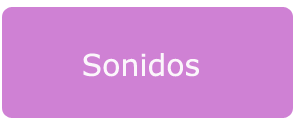
<style>
.page{position:relative;width:300px;height:125px;background:#cf81d4}
.page>*{position:absolute;margin:0}
.t1{font:30px "Verdana";color:#fbf6fb}
</style>
<div class="page">
<p class="t1" style="left:83px;top:53px;width:116px;height:24px">Sonidos</p>
</div>
